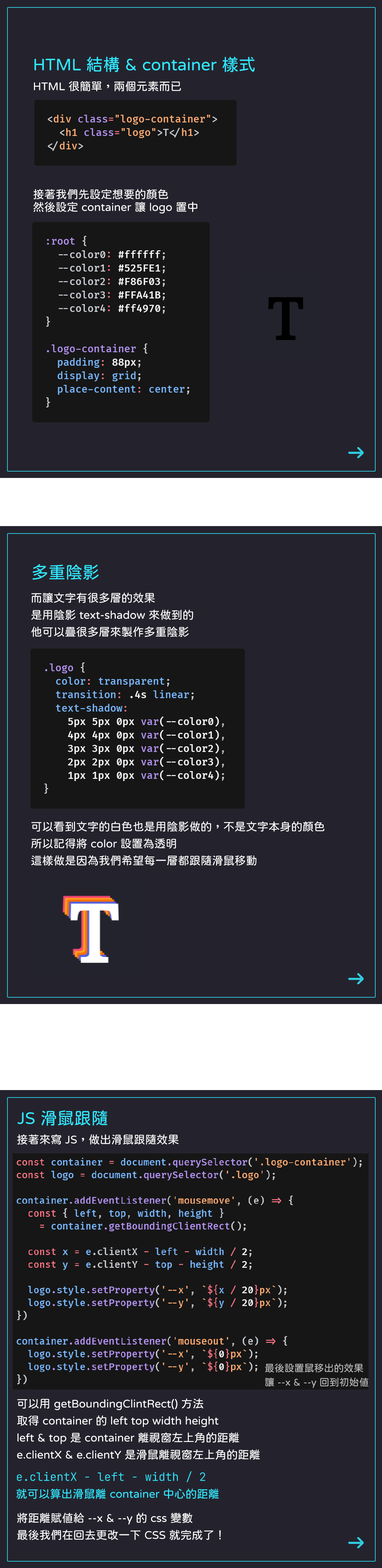
<style>
.page{position:relative;width:382px;height:1568px;background:#24232d}
.page>*{position:absolute;margin:0}
.t1{font:17px "jf-openhuninn-1.1";color:#30e8ff}
.t2{font:11.3px "jf-openhuninn-1.1";color:#ffffff}
.t3{font:11.3px/12.7px "jf-openhuninn-1.1";color:#ffffff}
.t4{font:11.3px/17px "jf-openhuninn-1.1";color:#ffffff}
.t5{font:9.9px/14.2px "jf-openhuninn-1.1";color:#bababa}
.t6{font:11.3px/17px "JetBrainsMono-Light";color:#30e8ff}
.t7{font:11.3px/17px "jf-openhuninn-1.1";color:#30e8ff}
</style>
<div class="page">
<p class="t1" style="left:34px;top:57px;width:221px;height:15px">HTML 結構 &amp; container 樣式</p>
<p class="t2" style="left:34px;top:81px;width:147px;height:10px">HTML 很簡單，兩個元素而已</p>
<p class="t3" style="left:33px;top:189px;width:165px;height:24px">接著我們先設定想要的顏色<br>然後設定 container 讓 logo 置中</p>
<p class="t1" style="left:33px;top:564px;width:66px;height:16px">多重陰影</p>
<p class="t4" style="left:31px;top:592px;width:162px;height:45px">而讓文字有很多層的效果<br>是用陰影 text-shadow 來做到的<br>他可以疊很多層來製作多重陰影</p>
<p class="t4" style="left:31px;top:821px;width:294px;height:45px">可以看到文字的白色也是用陰影做的，不是文字本身的顏色<br>所以記得將 color 設置為透明<br>這樣做是因為我們希望每一層都跟隨滑鼠移動</p>
<p class="t1" style="left:17px;top:1110px;width:91px;height:16px">JS 滑鼠跟隨</p>
<p class="t2" style="left:17px;top:1134px;width:162px;height:11px">接著來寫 JS，做出滑鼠跟隨效果</p>
<p class="t5" style="left:265px;top:1363px;width:104px;height:25px">最後設置鼠移出的效果<br>讓 --x &amp; --y 回到初始值</p>
<p class="t4" style="left:17px;top:1398px;width:243px;height:62px">可以用 getBoundingClintRect() 方法<br>取得 container 的 left top width height<br>left &amp; top 是 container 離視窗左上角的距離<br>e.clientX &amp; e.clientY 是滑鼠離視窗左上角的距離</p>
<p class="t6" style="left:16px;top:1471px;width:203px;height:28px">e.clientX - left - width / 2<span class="t7"> <br>就可以算出滑鼠離 container 中心的距離</span></p>
<p class="t4" style="left:17px;top:1513px;width:204px;height:27px">將距離賦值給 --x &amp; --y 的 css 變數<br>最後我們在回去更改一下 CSS 就完成了！</p>
</div>
